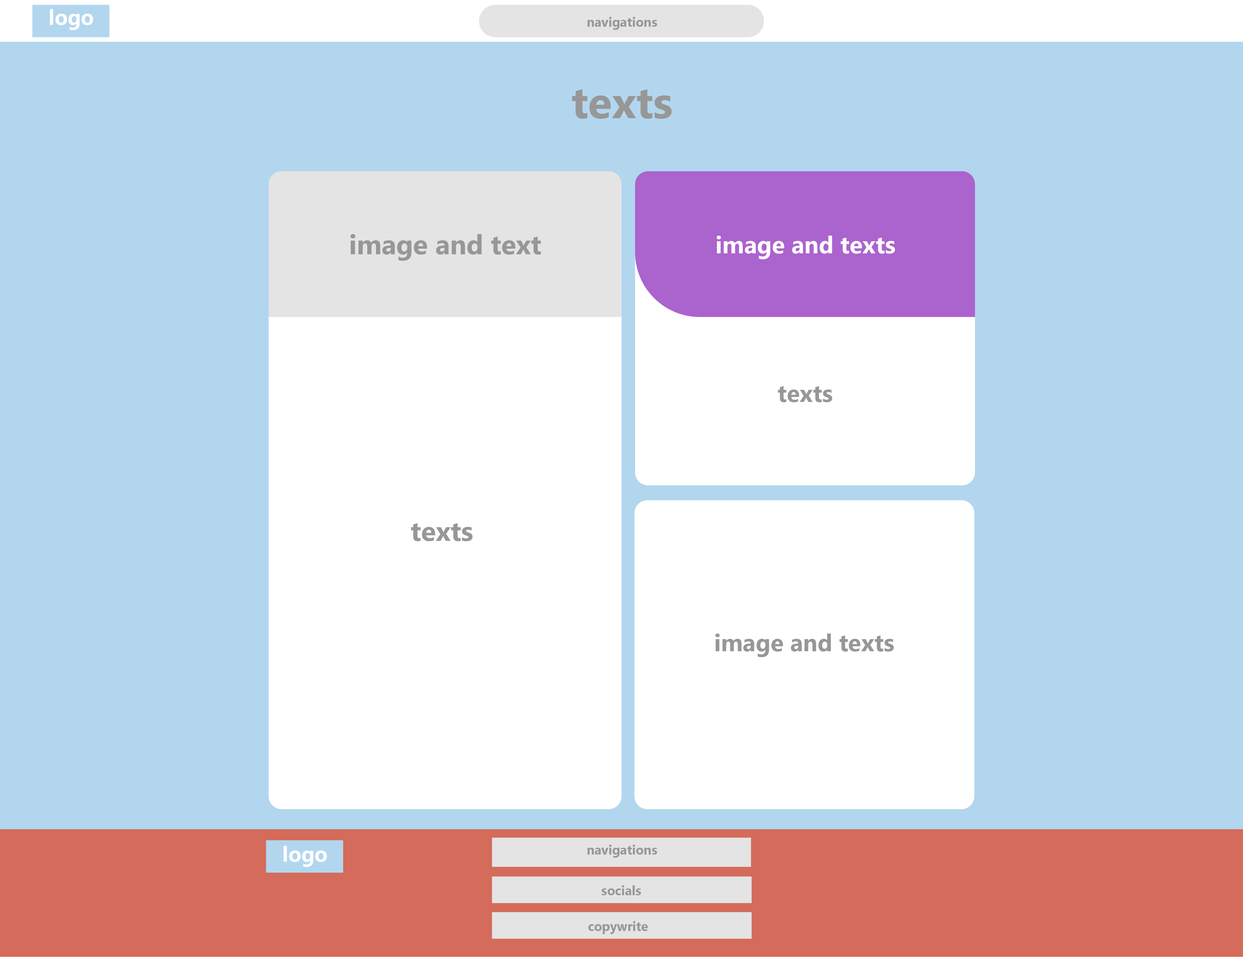
<style>
.page{position:relative;width:1243px;height:959px;background:#b2d6ee}
.page>*{position:absolute;margin:0}
.t1{font:21.4px "SegoeUI-Bold";color:#ffffff}
.t2{font:13px "SegoeUI-Bold";color:#979797}
.t3{font:44px "SegoeUI-Bold";color:#979797}
.t4{font:27.2px "SegoeUI-Bold";color:#979797}
.t5{font:24px "SegoeUI-Bold";color:#ffffff}
.t6{font:24px "SegoeUI-Bold";color:#979797}
</style>
<div class="page">
<p class="t1" style="left:50px;top:9px;width:43px;height:21px">logo</p>
<p class="t2" style="left:588px;top:17px;width:69px;height:13px">navigations</p>
<p class="t3" style="left:572px;top:89px;width:100px;height:30px">texts</p>
<p class="t4" style="left:350px;top:234px;width:191px;height:27px">image and text</p>
<p class="t5" style="left:717px;top:236px;width:178px;height:23px">image and texts</p>
<p class="t6" style="left:778px;top:386px;width:54px;height:16px">texts</p>
<p class="t4" style="left:411px;top:523px;width:62px;height:18px">texts</p>
<p class="t6" style="left:716px;top:634px;width:178px;height:23px">image and texts</p>
<p class="t1" style="left:284px;top:846px;width:43px;height:21px">logo</p>
<p class="t2" style="left:588px;top:845px;width:69px;height:13px">navigations</p>
<p class="t2" style="left:602px;top:885px;width:39px;height:10px">socials</p>
<p class="t2" style="left:588px;top:921px;width:60px;height:13px">copywrite</p>
</div>
